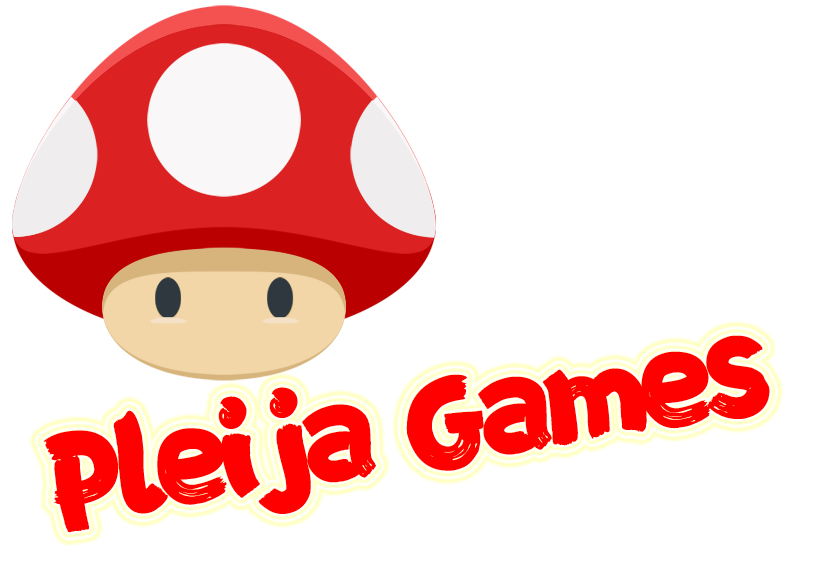
<style>
.page{position:relative;width:815px;height:572px;background:#ffffff}
.page>*{position:absolute;margin:0}
.t1{font:121.9px "FZFENSTXJW--GB1-0";letter-spacing:-0.08em;color:#ff0000}
</style>
<div class="page">
<p class="t1" style="left:43px;top:335px;width:727px;height:198px;rotate:-9deg">Pleija Games</p>
</div>
